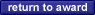
<style>
.page{position:relative;width:95px;height:15px;background:#333399}
.page>*{position:absolute;margin:0}
.t1{font:11px "Arial-BoldMT";color:#ffffff}
</style>
<div class="page">
<p class="t1" style="left:8px;top:3px;width:79px;height:8px">return to award</p>
</div>
